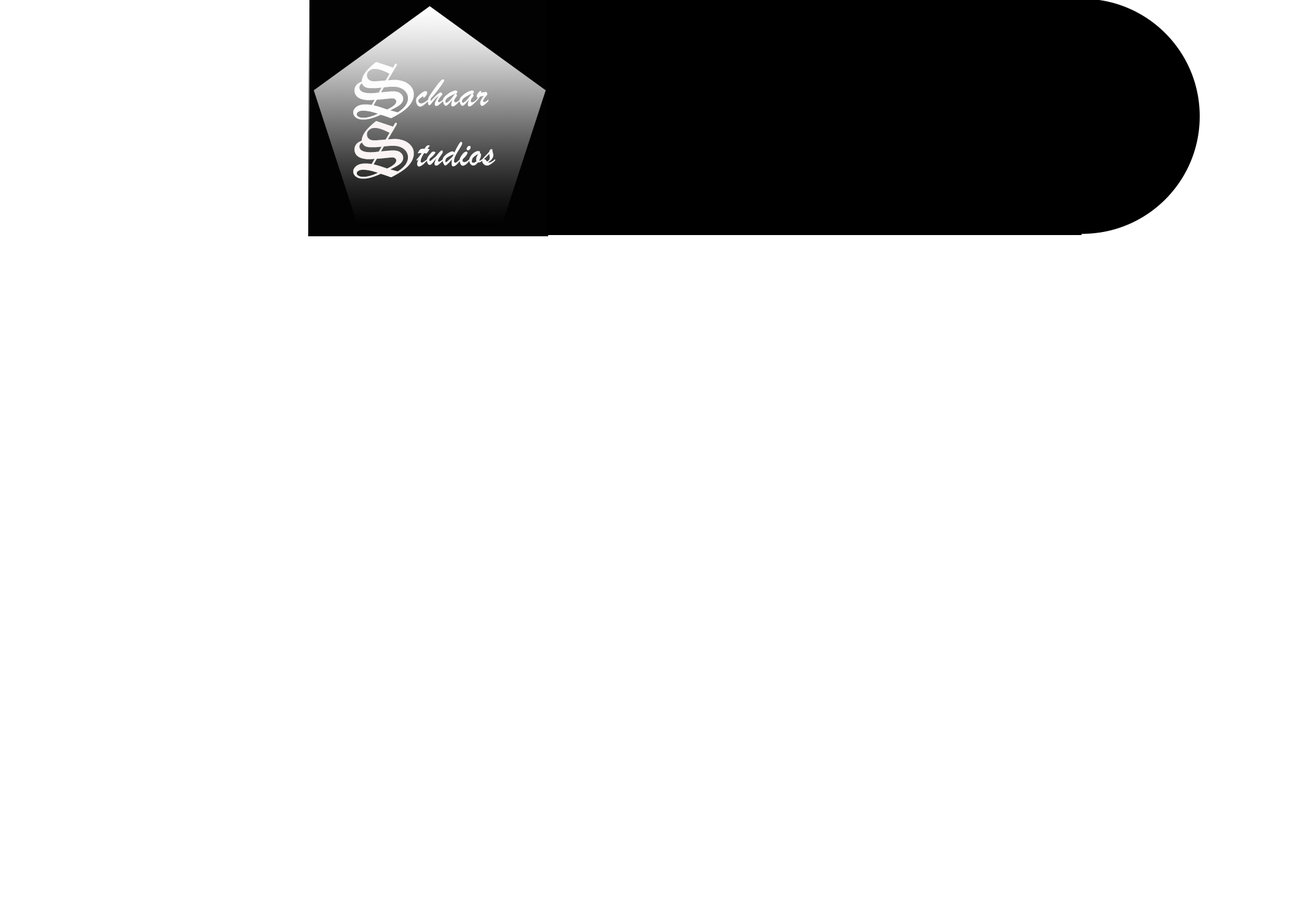
<style>
.page{position:relative;width:1292px;height:923px;background:#ffffff}
.page>*{position:absolute;margin:0}
.t1{font:76.9px "OldEnglishTextMT";color:#fdfdfd}
.t2{font:41px "BrushScriptMT";color:#fdfbfb}
.t3{font:76.9px "OldEnglishTextMT";color:#fbf4f4}
.t4{font:41px "BrushScriptMT";color:#fbfbfb}
</style>
<div class="page">
<p class="t1" style="left:353px;top:62px;width:61px;height:58px">S</p>
<p class="t2" style="left:416px;top:79px;width:73px;height:28px">chaar</p>
<p class="t3" style="left:353px;top:121px;width:61px;height:58px">S</p>
<p class="t4" style="left:417px;top:142px;width:78px;height:25px">tudios</p>
</div>
